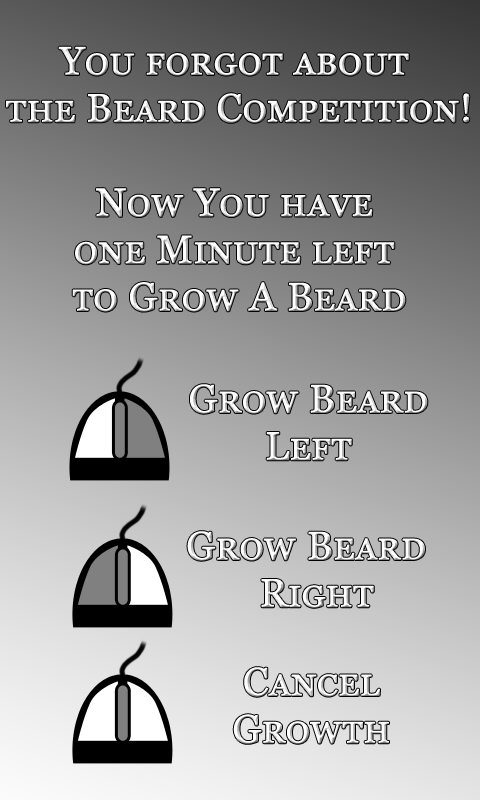
<style>
.page{position:relative;width:480px;height:800px}
.page>*{position:absolute;margin:0}
.t1{font:39.3px "Georgia";font-variant:small-caps;font-weight:bold}
</style>
<div class="page">
<p class="t1" style="left:6px;top:46px;width:464px;height:266px;text-align:center">You forgot about <br>the Beard Competition!<br><br>Now You have <br>one Minute left <br>to Grow A Beard</p>
<p class="t1" style="left:190px;top:384px;width:238px;height:77px;text-align:center">Grow Beard<br>Left</p>
</div>
